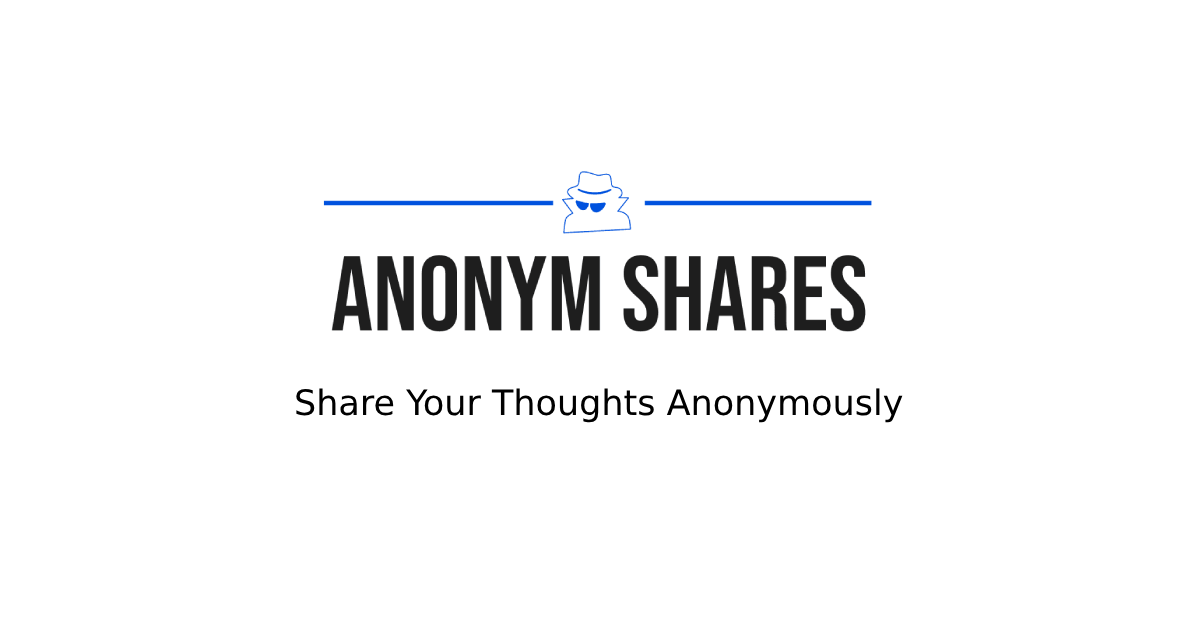
<style>
.page{position:relative;width:1200px;height:630px;background:#ffffff}
.page>*{position:absolute;margin:0}
.t1{font:35px "DejaVuSans";color:#000000}
</style>
<div class="page">
<p class="t1" style="left:296px;top:388px;width:607px;height:35px">Share Your Thoughts Anonymously</p>
</div>
